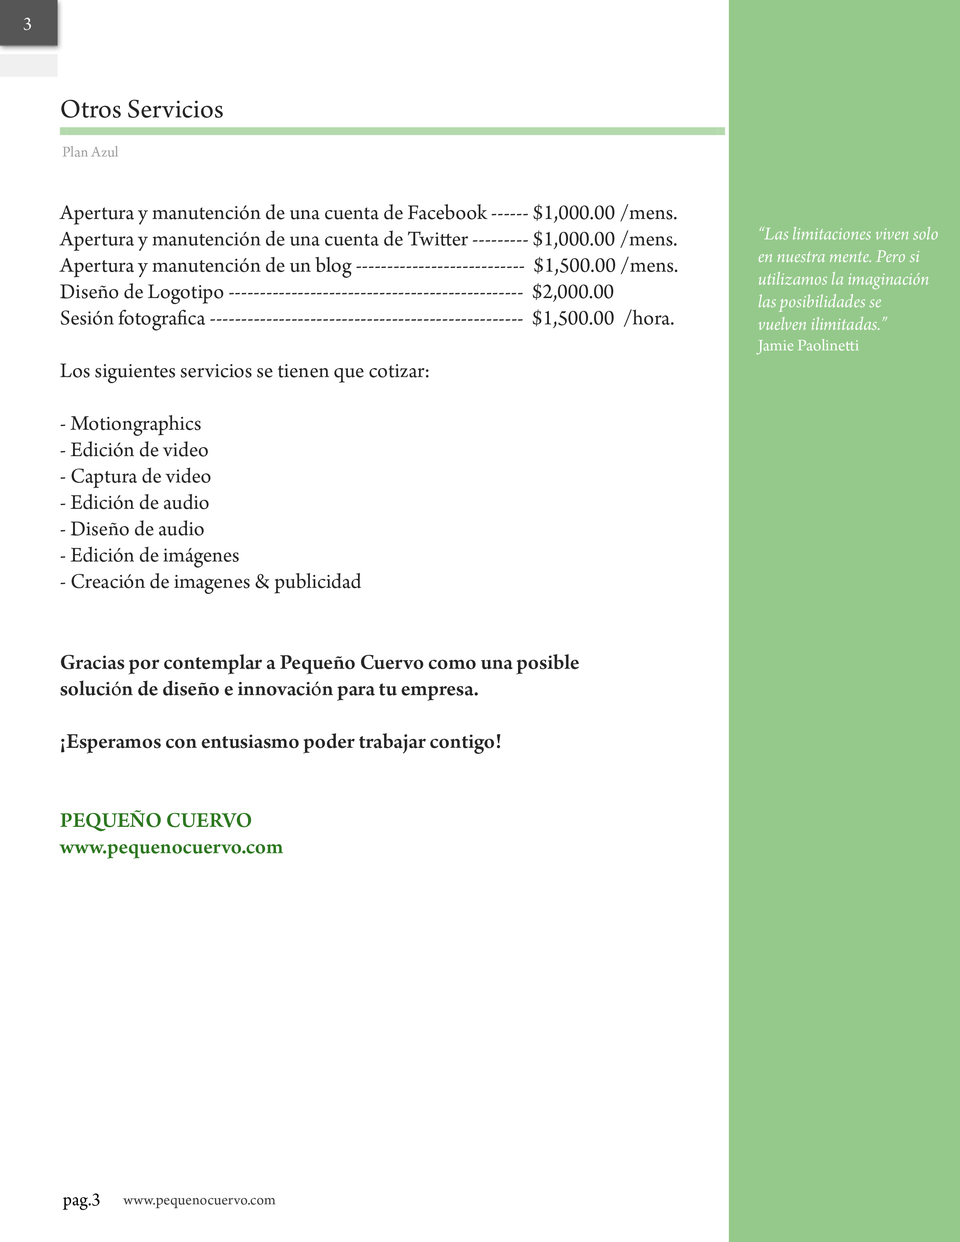
<style>
.page{position:relative;width:960px;height:1242px;background:#ffffff}
.page>*{position:absolute;margin:0}
.t1{font:18.8px "ArnoPro-Regular";color:#fcfcfc}
.t2{font:28.2px "ArnoPro-Regular";color:#252525}
.t3{font:15.7px "ArnoPro-Regular";color:#a0a0a0}
.t4{font:22px "ArnoPro-Regular";color:#252525}
.t5{font:23.5px "ArnoPro-Bold";color:#252525}
.t6{font:22px "ArnoPro-Smbd";color:#262626}
.t7{font:22px "ArnoPro-Smbd";color:#2c7720}
.t8{font:18.8px "ArnoPro-Italic";color:#ffffff}
.t9{font:17.3px "ArnoPro-Regular";color:#ffffff}
.t10{font:18.8px "ArnoPro-Regular";color:#010101}
.t11{font:15.7px "ArnoPro-Regular";color:#3c3c3c}
</style>
<div class="page">
<p class="t1" style="left:24px;top:18px;width:7px;height:12px">3</p>
<p class="t2" style="left:61px;top:100px;width:162px;height:18px">Otros Servicios</p>
<p class="t3" style="left:62px;top:146px;width:56px;height:11px">Plan Azul</p>
<p class="t4" style="left:59px;top:204px;width:618px;height:655px"><span class="t5"><br></span>Apertura y manutención de una cuenta de Facebook ------ $1,000.00 /mens.<br>Apertura y manutención de una cuenta de Twitter --------- $1,000.00 /mens.<br>Apertura y manutención de un blog ---------------------------  $1,500.00 /mens.<br>Diseño de Logotipo -----------------------------------------------  $2,000.00<br>Sesión fotografica --------------------------------------------------  $1,500.00  /hora.<br><br>Los siguientes servicios se tienen que cotizar:<br><br>- Motiongraphics<br>- Edición de video<br>- Captura de video<br>- Edición de audio<br>- Diseño de audio<br>- Edición de imágenes<br>- Creación de imagenes &amp; publicidad<br><br><br><span class="t6">Gracias por contemplar a Pequeño Cuervo como una posible<br>soluci</span>ó<span class="t6">n de diseño e innovaci</span>ó<span class="t6">n para tu empresa. <br><br>¡Esperamos con entusiasmo poder trabajar contigo!<br><br></span><span class="t7"><br>PEQUEÑO CUERVO<br>www.pequenocuervo.com</span></p>
<p class="t8" style="left:756px;top:226px;width:182px;height:129px">“Las limitaciones viven solo<br>en nuestra mente. Pero si <br>utilizamos la imaginación<br>las posibilidades se<br>vuelven ilimitadas.”<br><span class="t9">Jamie Paolinetti</span></p>
<p class="t10" style="left:63px;top:1194px;width:37px;height:16px">pag.3</p>
<p class="t11" style="left:123px;top:1198px;width:153px;height:11px">www.pequenocuervo.com</p>
</div>
